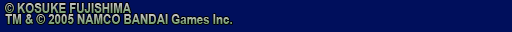
<style>
.page{position:relative;width:512px;height:32px;background:#000f5c}
.page>*{position:absolute;margin:0}
.t1{font:14px "ArialNarrow-Bold"}
</style>
<div class="page">
<p class="t1" style="left:5px;top:3px;width:126px;height:10px">© KOSUKE FUJISHIMA</p>
<p class="t1" style="left:5px;top:14px;width:227px;height:10px">TM &amp; © 2005 NAMCO BANDAI Games Inc.</p>
</div>
